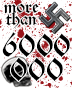
<style>
.page{position:relative;width:72px;height:88px;background:#ffffff}
.page>*{position:absolute;margin:0}
.t1{font:17.9px/12.8px "Schwabacher-Regular";color:#000000}
.t2{font:33.9px/24.2px "Schwabacher-Regular";color:#000000}
</style>
<div class="page">
<p class="t1" style="left:4px;top:3px;width:35px;height:25px;text-align:center">more<br>than</p>
<p class="t2" style="left:2px;top:32px;width:68px;height:49px;text-align:center">6000<br>000</p>
</div>
